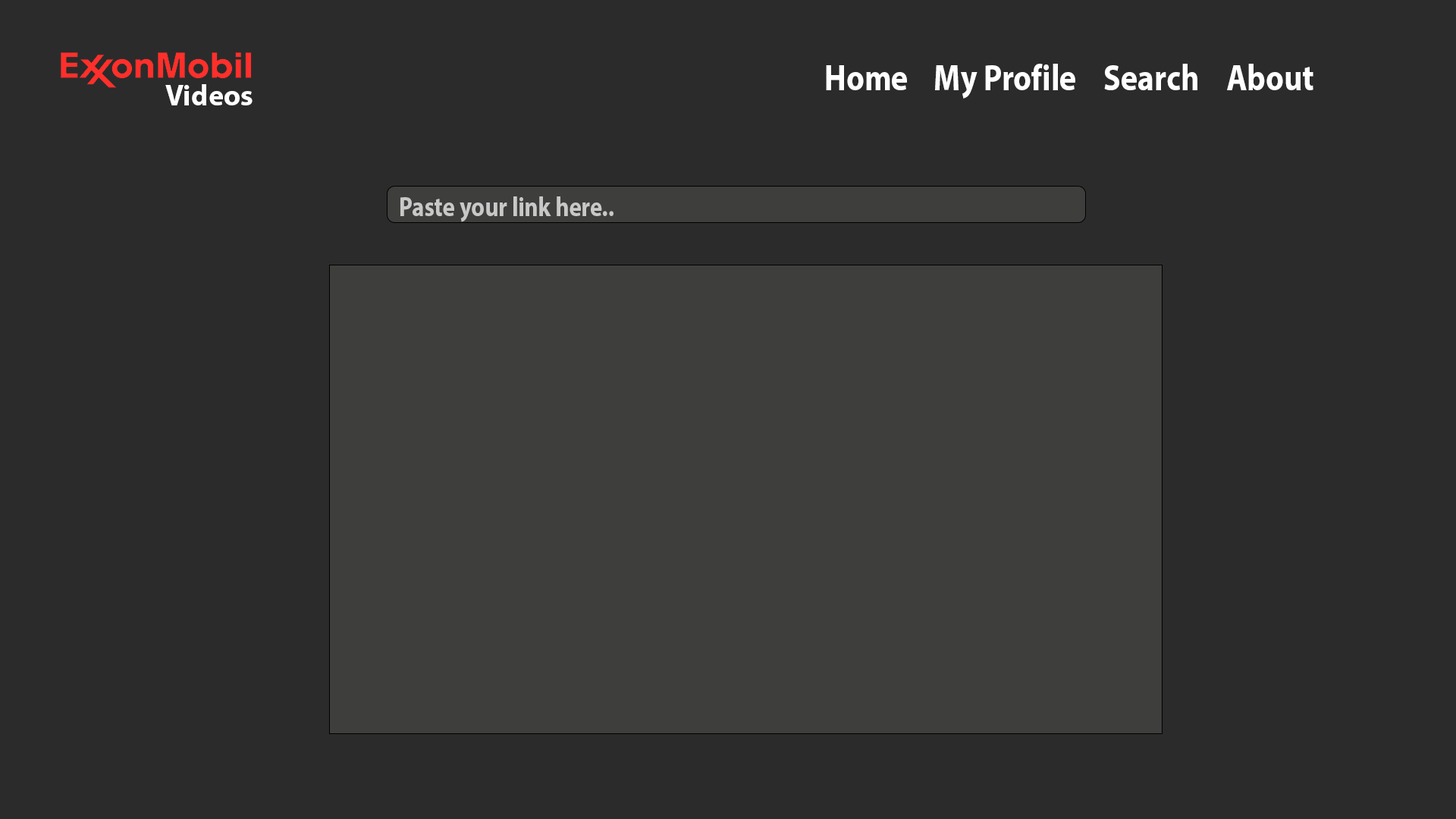
<style>
.page{position:relative;width:1456px;height:819px;background:#2b2b2b}
.page>*{position:absolute;margin:0}
.t1{font:37px "MyriadHebrew-Bold";color:#ffffff;scale:0.85 1}
.t2{font:29.6px "MyriadHebrew-Bold";color:#ffffff}
.t3{font:27.2px "MyriadHebrew-Bold";color:#c8c8c8;scale:0.85 1}
</style>
<div class="page">
<p class="t1" style="left:826px;top:65px;width:81px;height:25px">Home</p>
<p class="t1" style="left:935px;top:64px;width:140px;height:35px">My Profile</p>
<p class="t1" style="left:1104px;top:64px;width:93px;height:26px">Search</p>
<p class="t1" style="left:1227px;top:64px;width:86px;height:26px">About</p>
<p class="t2" style="left:165px;top:84px;width:88px;height:21px">Videos</p>
<p class="t3" style="left:400px;top:196px;width:213px;height:26px">Paste your link here..</p>
</div>
